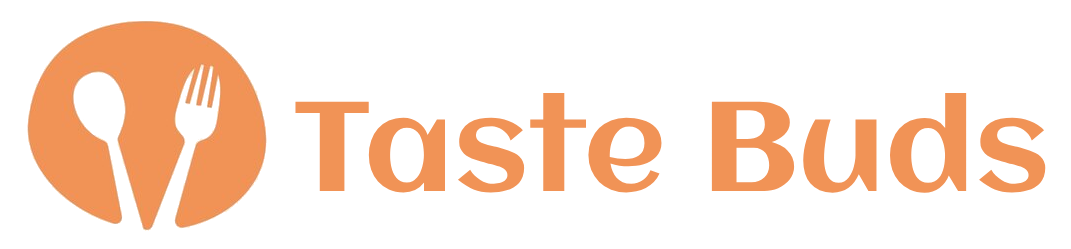
<style>
.page{position:relative;width:1071px;height:249px;background:#ffffff}
.page>*{position:absolute;margin:0}
.t1{font:127px "Aclonica-Regular";color:#f19356}
</style>
<div class="page">
<p class="t1" style="left:295px;top:93px;width:751px;height:100px">Taste Buds</p>
</div>
